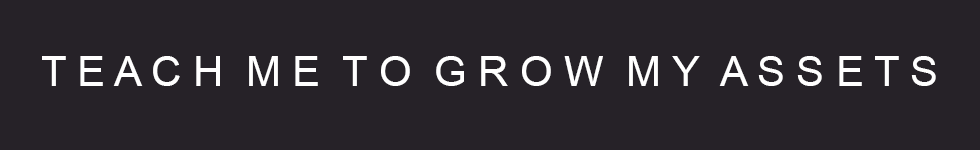
<style>
.page{position:relative;width:980px;height:150px;background:#262228}
.page>*{position:absolute;margin:0}
.t1{font:41.7px "ArialMT";color:#ffffff}
</style>
<div class="page">
<p class="t1" style="left:42px;top:56px;width:894px;height:30px">T E A C H  M E  T O  G R O W  M Y  A S S E T S</p>
</div>
